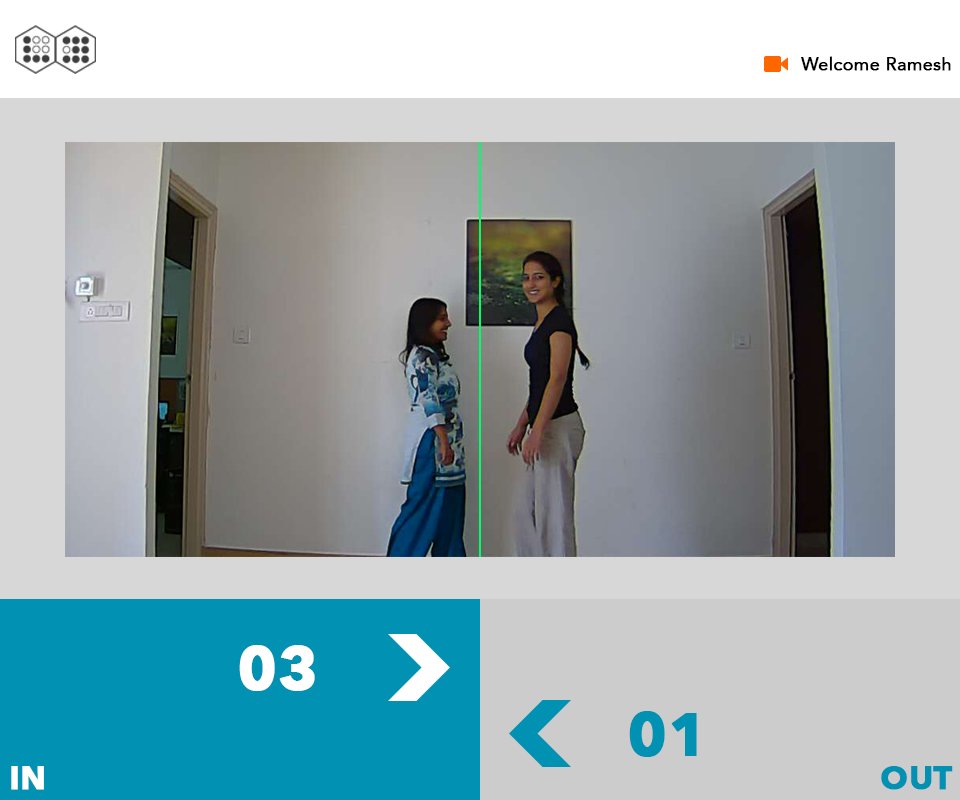
<style>
.page{position:relative;width:960px;height:800px}
.page>*{position:absolute;margin:0}
.t1{font:18px "Avenir-Roman";color:#000000;font-weight:bold}
.t2{font:60px "AvenirNext-Bold";color:#ffffff;font-weight:bold}
.t3{font:60px "AvenirNext-Bold";color:#0091b3;font-weight:bold}
.t4{font:32px "AvenirNext-Bold";color:#ffffff;font-weight:bold}
.t5{font:32px "AvenirNext-Bold";color:#0091b3;font-weight:bold}
</style>
<div class="page">
<p class="t1" style="left:801px;top:56px;width:150px;height:15px">Welcome Ramesh</p>
<p class="t2" style="left:239px;top:645px;width:76px;height:46px">03</p>
<p class="t3" style="left:629px;top:711px;width:68px;height:46px">01</p>
<p class="t4" style="left:11px;top:766px;width:33px;height:24px">IN</p>
<p class="t5" style="left:881px;top:766px;width:72px;height:24px">OUT</p>
</div>
